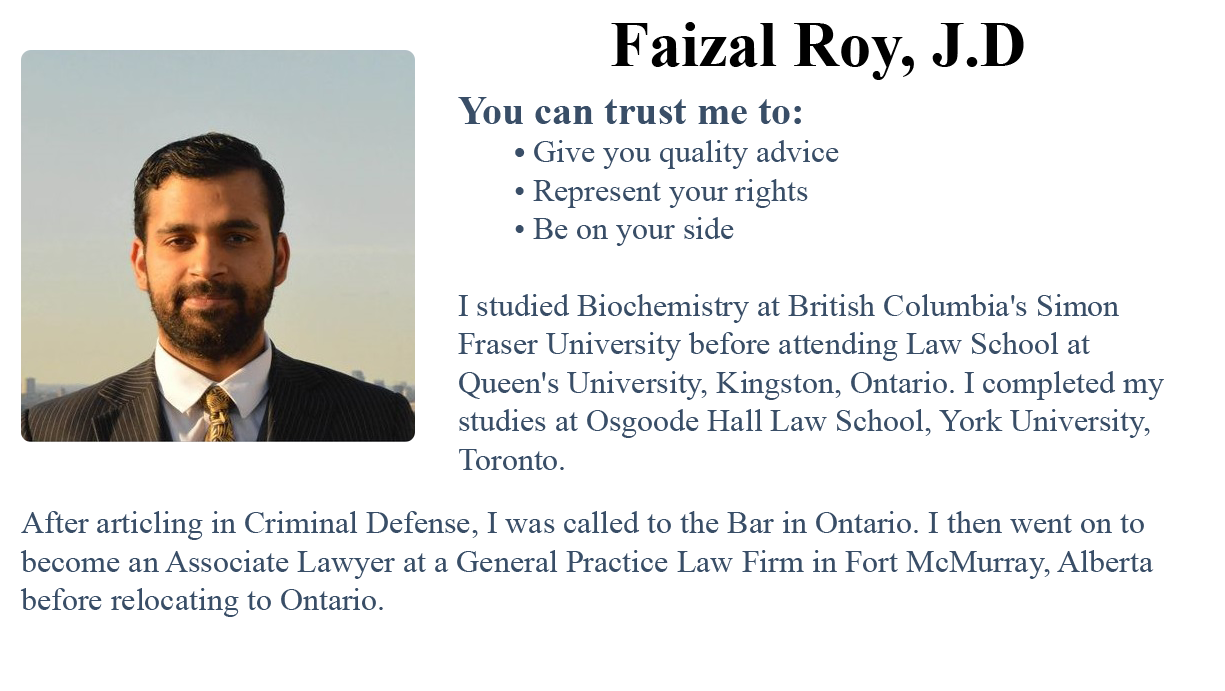
<style>
.page{position:relative;width:1225px;height:691px;background:#ffffff}
.page>*{position:absolute;margin:0}
.t1{font:64px "TimesNewRomanPS-BoldMT";color:#000000}
.t2{font:32px "TimesNewRomanPSMT";color:#394e67}
.t3{font:40px "TimesNewRomanPS-BoldMT";color:#394e67}
.t4{font:32px "TimesNewRomanPS-BoldMT";color:#394e67}
</style>
<div class="page">
<p class="t1" style="left:611px;top:22px;width:413px;height:58px">Faizal Roy, J.D</p>
<p class="t2" style="left:458px;top:97px;width:706px;height:373px"><span class="t3">You can trust me to:<br></span><span class="t4">       • </span>Give you quality advice<br>       • Represent your rights<br>       • Be on your side<br><br>I studied Biochemistry at British Columbia's Simon <br>Fraser University before attending Law School at <br>Queen's University, Kingston, Ontario. I completed my <br>studies at Osgoode Hall Law School, York University, <br>Toronto.</p>
<p class="t2" style="left:20px;top:511px;width:1134px;height:106px">After articling in Criminal Defense, I was called to the Bar in Ontario. I then went on to<br>become an Associate Lawyer at a General Practice Law Firm in Fort McMurray, Alberta <br>before relocating to Ontario.</p>
</div>
